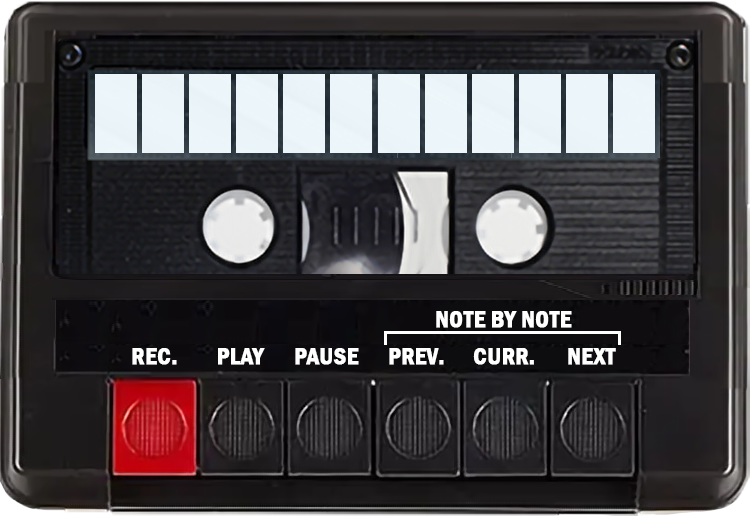
<style>
.page{position:relative;width:750px;height:516px}
.page>*{position:absolute;margin:0}
.t1{font:24px "FranklinGothic-DemiCond";color:#ffffff;font-weight:bold}
</style>
<div class="page">
<p class="t1" style="left:436px;top:311px;width:136px;height:17px">NOTE BY NOTE</p>
<p class="t1" style="left:132px;top:348px;width:45px;height:17px">REC.</p>
<p class="t1" style="left:218px;top:348px;width:47px;height:17px">PLAY</p>
<p class="t1" style="left:295px;top:348px;width:64px;height:17px">PAUSE</p>
<p class="t1" style="left:389px;top:348px;width:55px;height:17px">PREV.</p>
<p class="t1" style="left:473px;top:348px;width:61px;height:17px">CURR.</p>
<p class="t1" style="left:568px;top:348px;width:48px;height:17px">NEXT</p>
</div>
